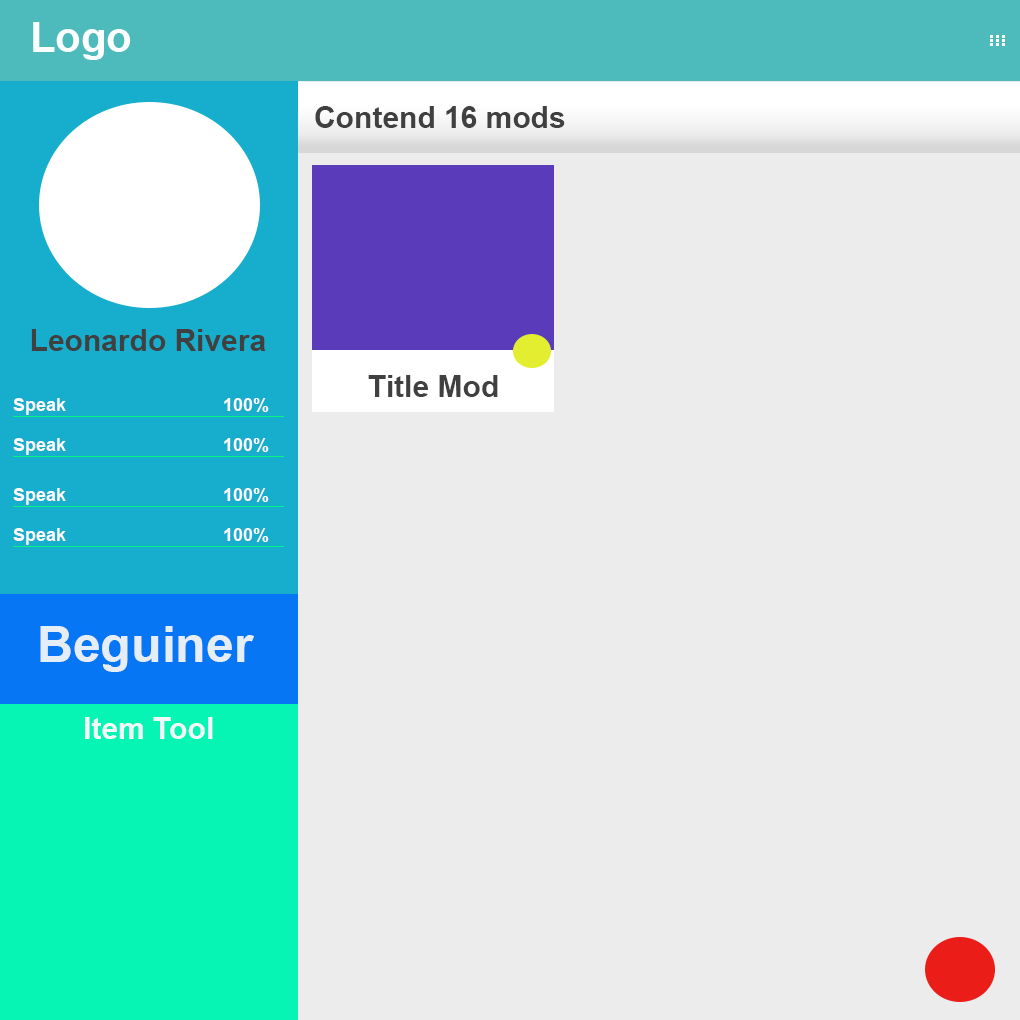
<style>
.page{position:relative;width:1020px;height:1020px;background:#edecec}
.page>*{position:absolute;margin:0}
.t1{font:42px "Arial-BoldMT";color:#fcffff}
.t2{font:30px "Arial-BoldMT";color:#414040}
.t3{font:30px "Arial-BoldMT";color:#403f3f}
.t4{font:18px "Arial-BoldMT";color:#fbfbfb}
.t5{font:50px "Arial-BoldMT";color:#e5edf7}
.t6{font:30px "Arial-BoldMT";color:#f2faf8}
</style>
<div class="page">
<p class="t1" style="left:33px;top:22px;width:98px;height:38px">Logo</p>
<p class="t2" style="left:315px;top:106px;width:250px;height:22px">Contend 16 mods</p>
<p class="t3" style="left:31px;top:329px;width:235px;height:22px">Leonardo Rivera</p>
<p class="t2" style="left:368px;top:375px;width:130px;height:22px">Title Mod</p>
<p class="t4" style="left:13px;top:398px;width:53px;height:17px">Speak</p>
<p class="t4" style="left:224px;top:398px;width:45px;height:14px">100%</p>
<p class="t4" style="left:13px;top:438px;width:53px;height:17px">Speak</p>
<p class="t4" style="left:224px;top:438px;width:45px;height:14px">100%</p>
<p class="t4" style="left:13px;top:488px;width:53px;height:17px">Speak</p>
<p class="t4" style="left:224px;top:488px;width:45px;height:14px">100%</p>
<p class="t4" style="left:13px;top:528px;width:53px;height:17px">Speak</p>
<p class="t4" style="left:224px;top:528px;width:45px;height:14px">100%</p>
<p class="t5" style="left:40px;top:626px;width:214px;height:46px">Beguiner</p>
<p class="t6" style="left:85px;top:717px;width:128px;height:22px">Item Tool</p>
</div>
